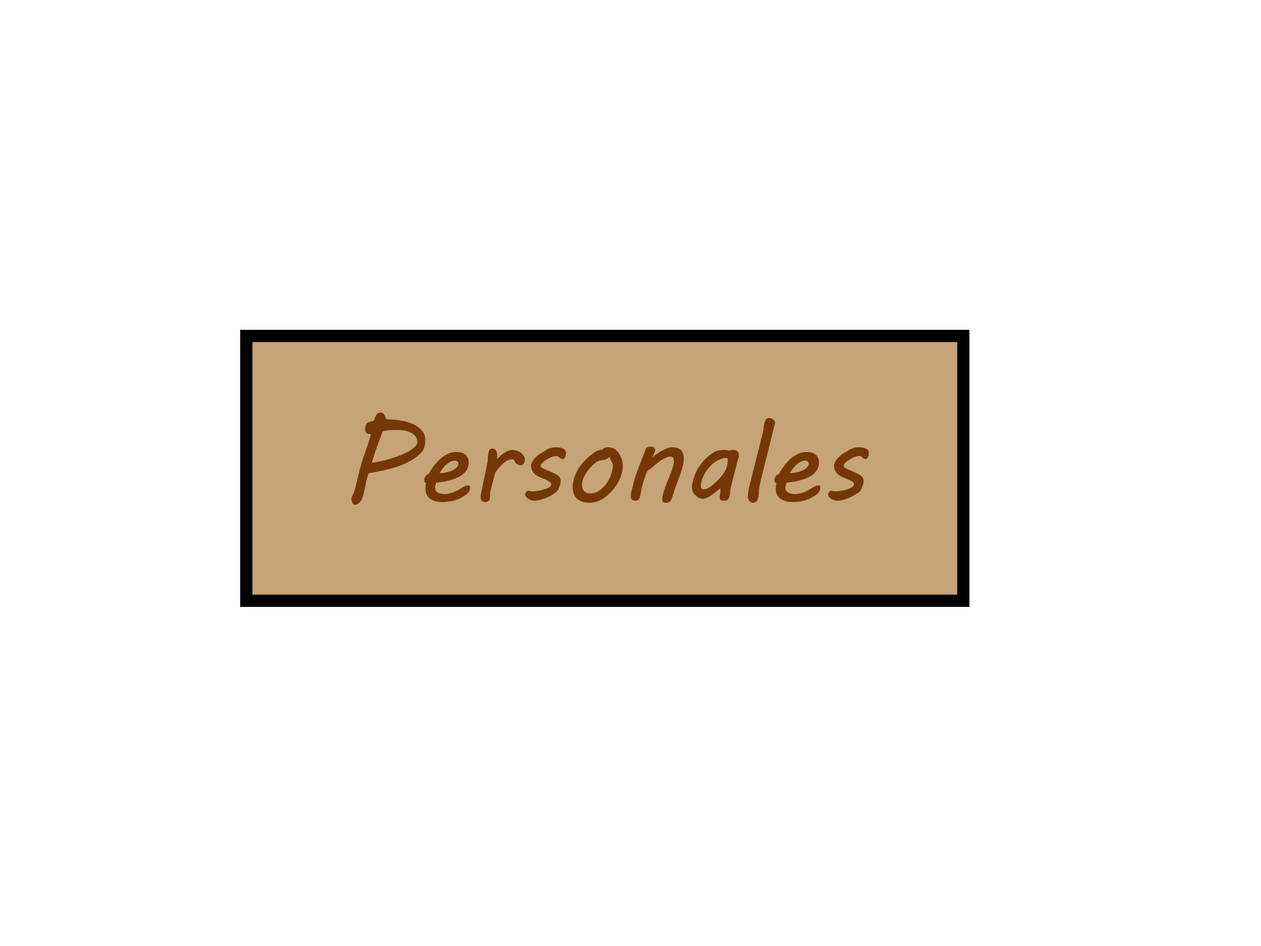
<style>
.page{position:relative;width:1261px;height:946px;background:#ffffff}
.page>*{position:absolute;margin:0}
.t1{font:111.2px "MVBoli";color:#753705}
</style>
<div class="page">
<p class="t1" style="left:351px;top:412px;width:518px;height:92px">Personales</p>
</div>
